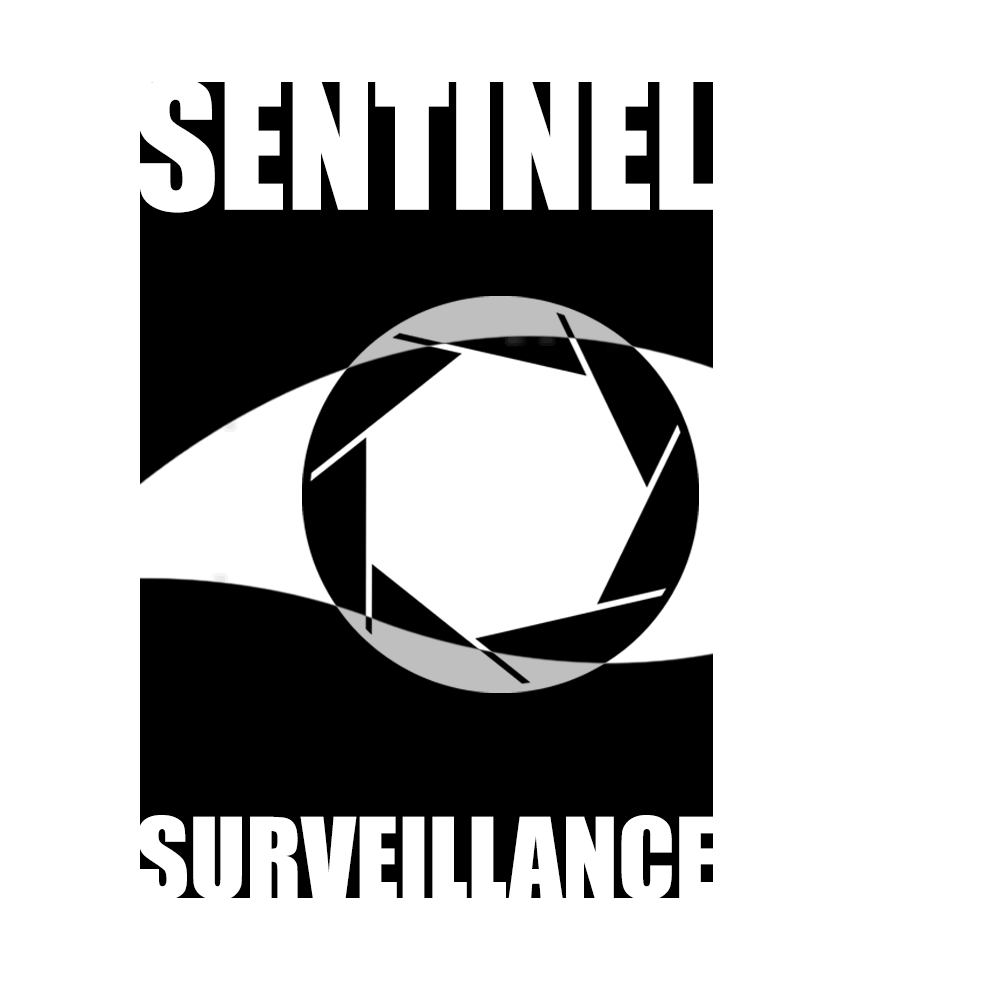
<style>
.page{position:relative;width:1000px;height:1000px;background:#ffffff}
.page>*{position:absolute;margin:0}
.t1{font:163.2px "Impact";color:#ffffff}
.t2{font:103.4px "Impact";color:#ffffff}
</style>
<div class="page">
<p class="t1" style="left:137px;top:77px;width:577px;height:136px">SENTINEL</p>
<p class="t2" style="left:138px;top:815px;width:579px;height:86px">SURVEILLANCE</p>
</div>
